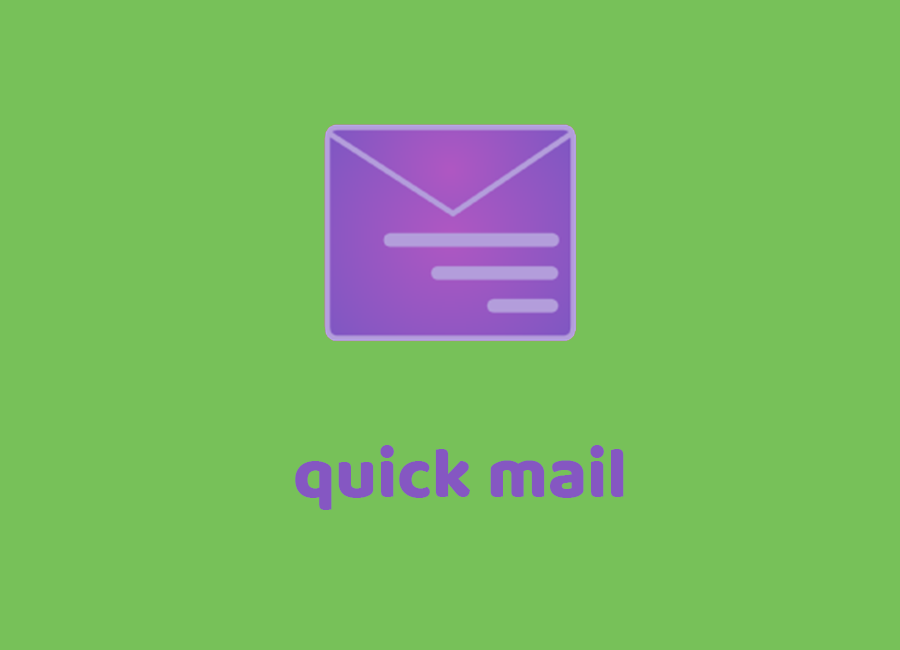
<style>
.page{position:relative;width:900px;height:650px;background:#77c159}
.page>*{position:absolute;margin:0}
.t1{font:72px "Baloo-Regular";color:#8557c2}
</style>
<div class="page">
<p class="t1" style="left:295px;top:445px;width:329px;height:65px">quick mail</p>
</div>
